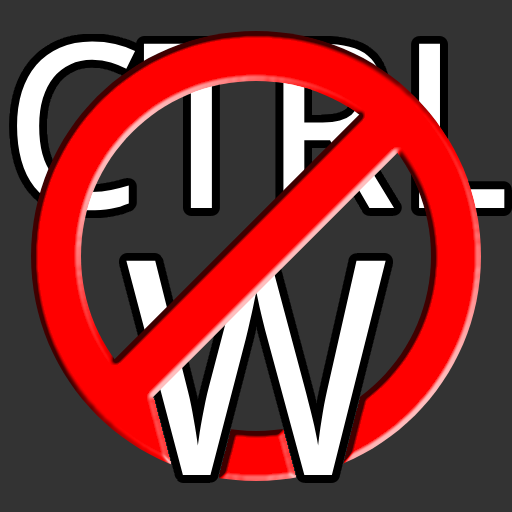
<style>
.page{position:relative;width:512px;height:512px;background:#333333}
.page>*{position:absolute;margin:0}
.t1{font:230px "DroidSans"}
.t2{font:300px "DroidSans";color:#ffffff}
</style>
<div class="page">
<p class="t1" style="left:17px;top:41px;width:488px;height:170px">CTRL</p>
<p class="t2" style="left:126px;top:260px;width:260px;height:215px">W</p>
</div>
